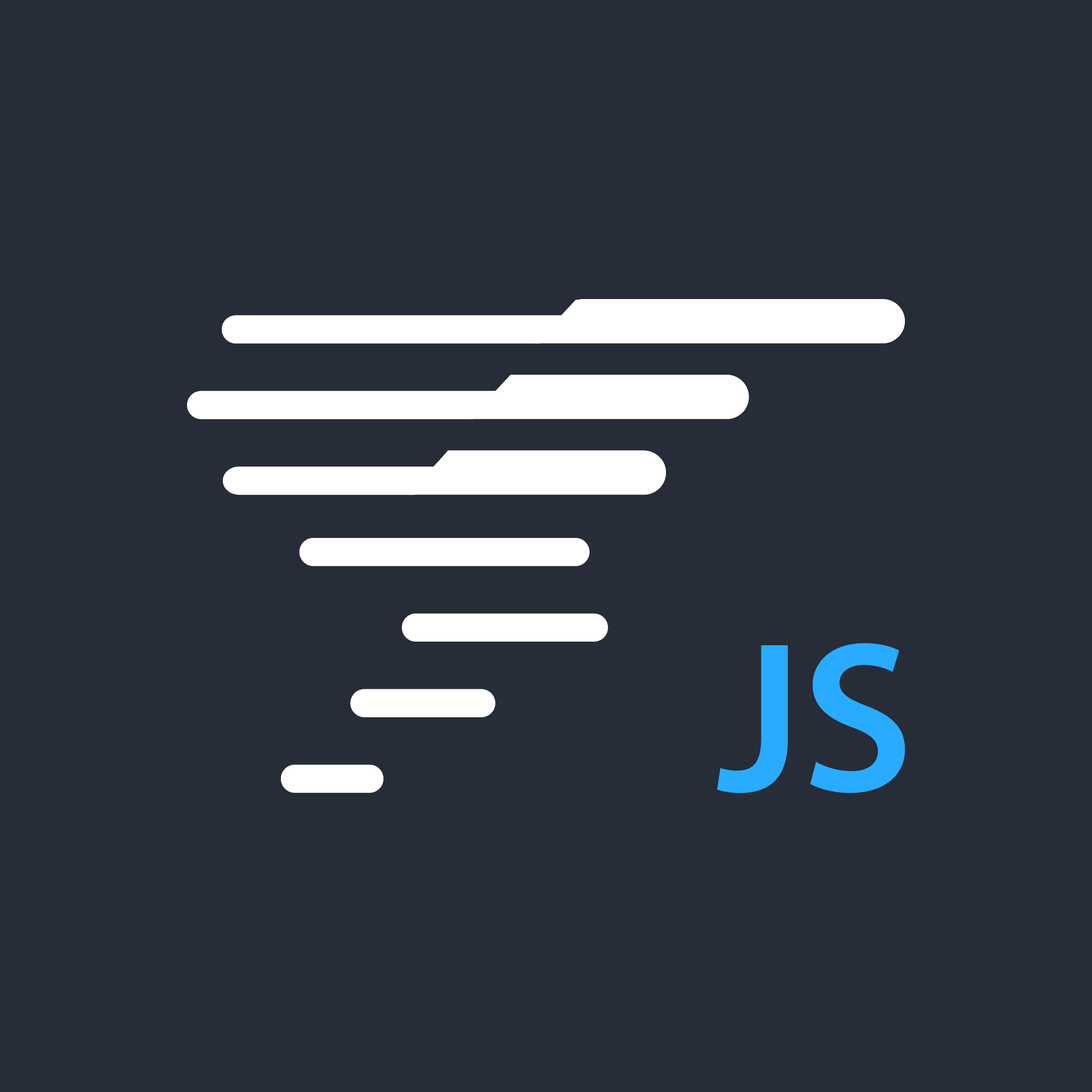
<style>
.page{position:relative;width:1092px;height:1092px;background:#262c38}
.page>*{position:absolute;margin:0}
.t1{font:215.9px "MyriadPro-Semibold";color:#29acff}
</style>
<div class="page">
<p class="t1" style="left:717px;top:643px;width:188px;height:150px">JS</p>
</div>
